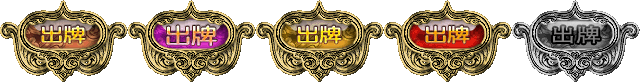
<style>
.page{position:relative;width:640px;height:82px;background:#ffffff}
.page>*{position:absolute;margin:0}
.t1{font:18.4px "STXihei";color:#868585;font-weight:bold;scale:1.34 1}
</style>
<div class="page">
<p class="t1" style="left:553px;top:26px;width:47px;height:18px">出牌</p>
</div>
